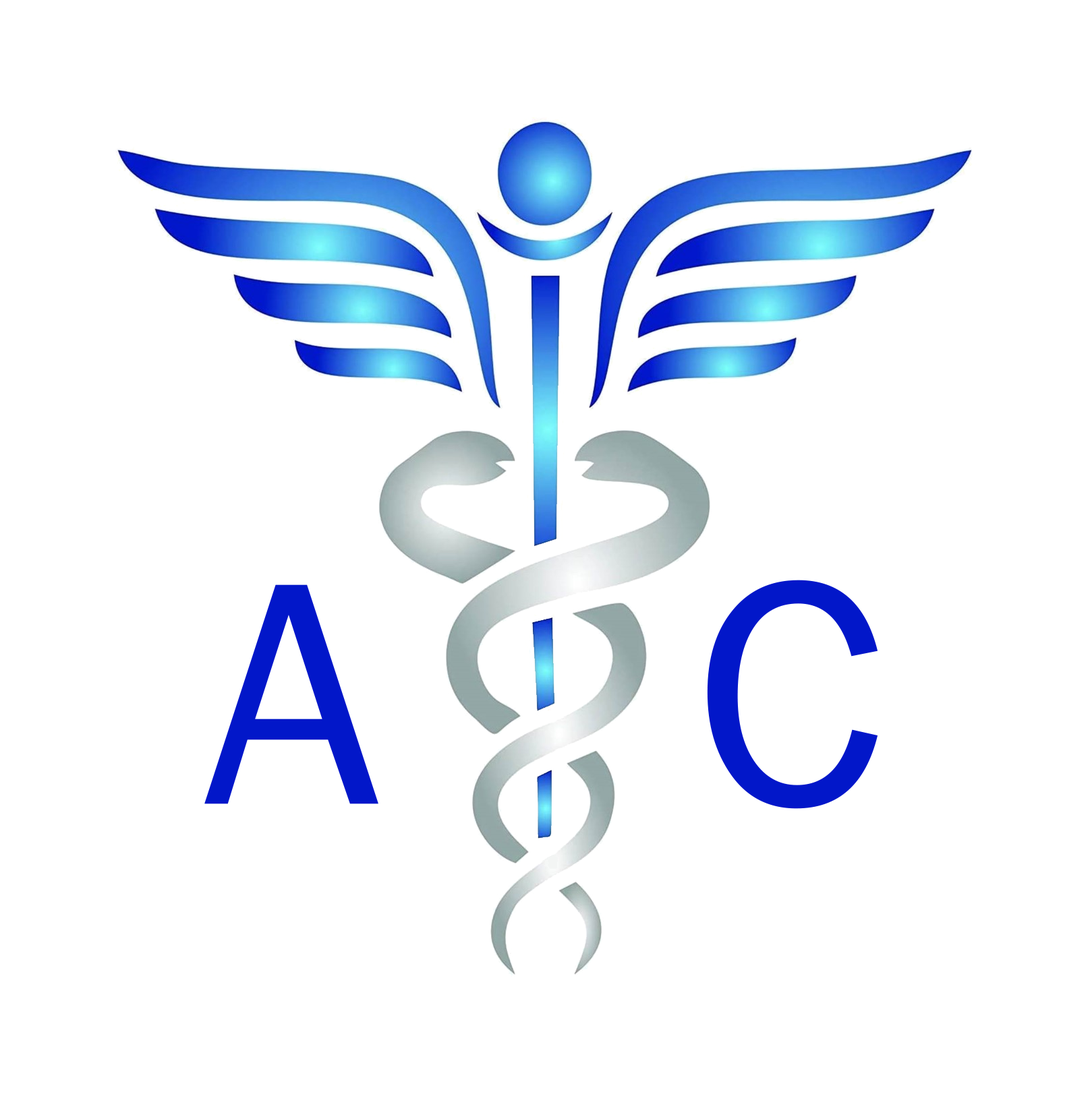
<style>
.page{position:relative;width:1090px;height:1094px;background:#ffffff}
.page>*{position:absolute;margin:0}
.t1{font:327.5px "FranklinGothic-Book";color:#0217c9;font-weight:bold}
</style>
<div class="page">
<p class="t1" style="left:707px;top:580px;width:170px;height:229px">C</p>
<p class="t1" style="left:204px;top:585px;width:174px;height:219px">A</p>
</div>
